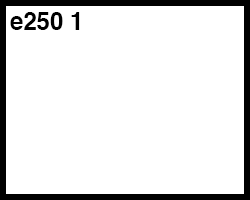
<style>
.page{position:relative;width:250px;height:200px;background:#ffffff}
.page>*{position:absolute;margin:0}
.t1{font:24px "Helvetica-Bold";color:#000000}
</style>
<div class="page">
<p class="t1" style="left:10px;top:12px;width:70px;height:18px">e250 1</p>
</div>
